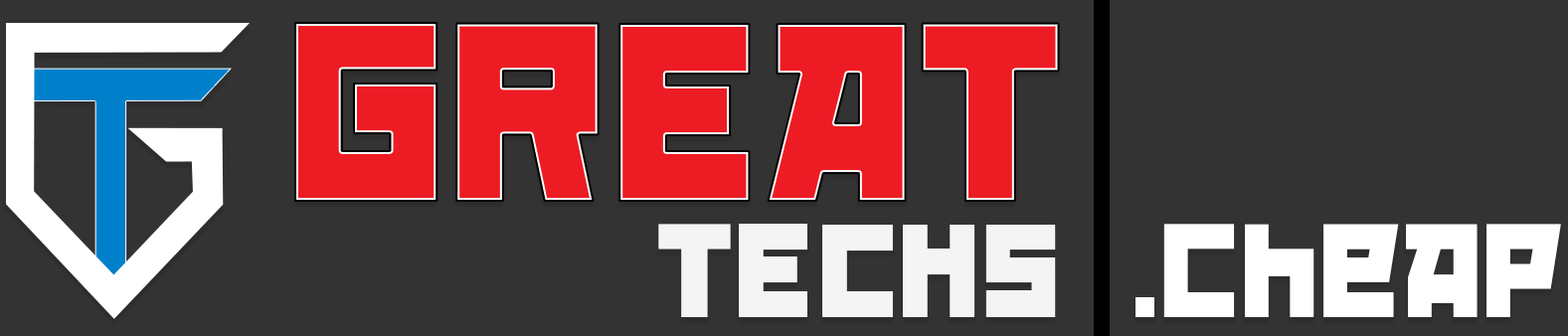
<style>
.page{position:relative;width:1568px;height:336px;background:#333333}
.page>*{position:absolute;margin:0}
.t1{font:221.3px "RedOctober-Fat";color:#ed1c24;scale:0.95 1}
.t2{font:116.4px "RedOctober-Fat";color:#f4f4f4;scale:0.95 1}
.t3{font:116.4px "RedOctober-Fat";color:#ffffff;scale:0.95 1}
</style>
<div class="page">
<p class="t1" style="left:295px;top:23px;width:764px;height:178px">GREAT</p>
<p class="t2" style="left:658px;top:224px;width:398px;height:93px">TECHs</p>
<p class="t3" style="left:1135px;top:224px;width:426px;height:93px">.cheap</p>
</div>
